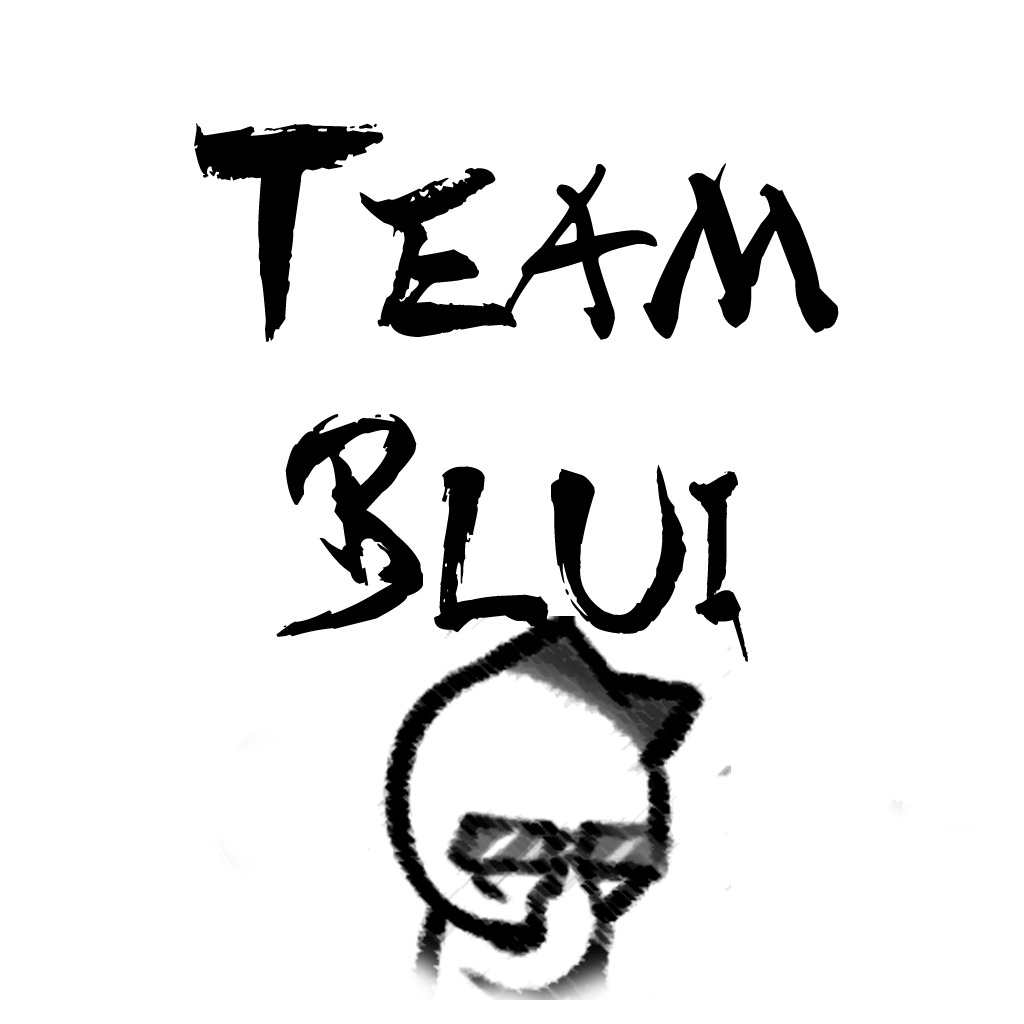
<style>
.page{position:relative;width:1024px;height:1024px;background:#ffffff}
.page>*{position:absolute;margin:0}
.t1{font:300px "DISTInkingRegular";color:#000000}
</style>
<div class="page">
<p class="t1" style="left:194px;top:123px;width:645px;height:219px">Team</p>
<p class="t1" style="left:276px;top:414px;width:472px;height:248px">Blui</p>
</div>
